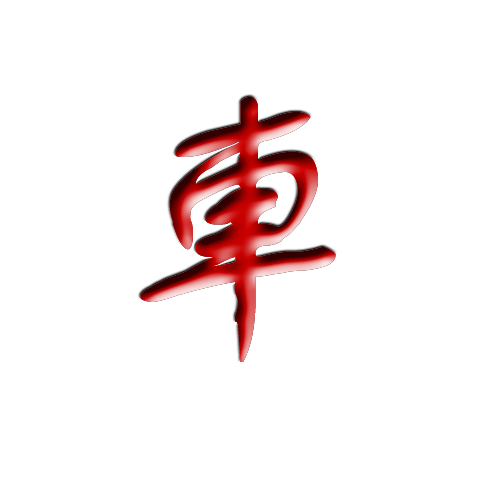
<style>
.page{position:relative;width:500px;height:500px;background:#ffffff}
.page>*{position:absolute;margin:0}
.t1{font:320px "FZSTK--GBK1-0"}
</style>
<div class="page">
<p class="t1" style="left:140px;top:96px;width:196px;height:266px">車</p>
</div>
